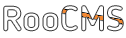
<style>
.page{position:relative;width:126px;height:38px;background:#ffffff}
.page>*{position:absolute;margin:0}
.t1{font:36px "BloggerSans-Bold"}
</style>
<div class="page">
<p class="t1" style="left:3px;top:5px;width:121px;height:27px">RooCMS</p>
</div>
